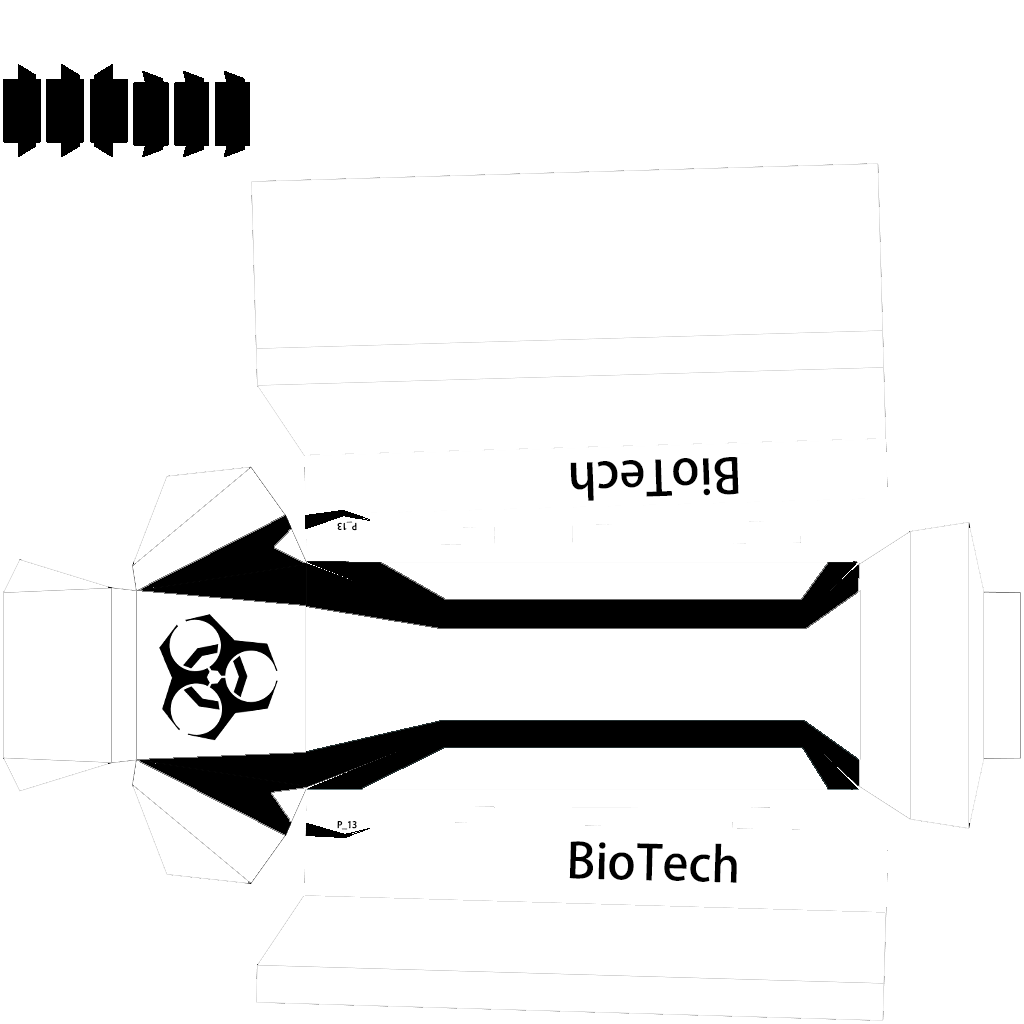
<style>
.page{position:relative;width:1024px;height:1024px;background:#ffffff}
.page>*{position:absolute;margin:0}
.t1{font:48px "AdobeHeitiStd-Regular";color:#000000}
.t2{font:9px "AdobeHeitiStd-Regular";color:#000000}
</style>
<div class="page">
<p class="t1" style="left:570px;top:457px;width:169px;height:44px;rotate:178deg">BioTech</p>
<p class="t2" style="left:337px;top:521px;width:20px;height:10px;rotate:179deg">P_13</p>
<p class="t2" style="left:337px;top:821px;width:20px;height:9px;rotate:1deg">P_13</p>
<p class="t1" style="left:569px;top:841px;width:168px;height:42px;rotate:2deg">BioTech</p>
</div>
